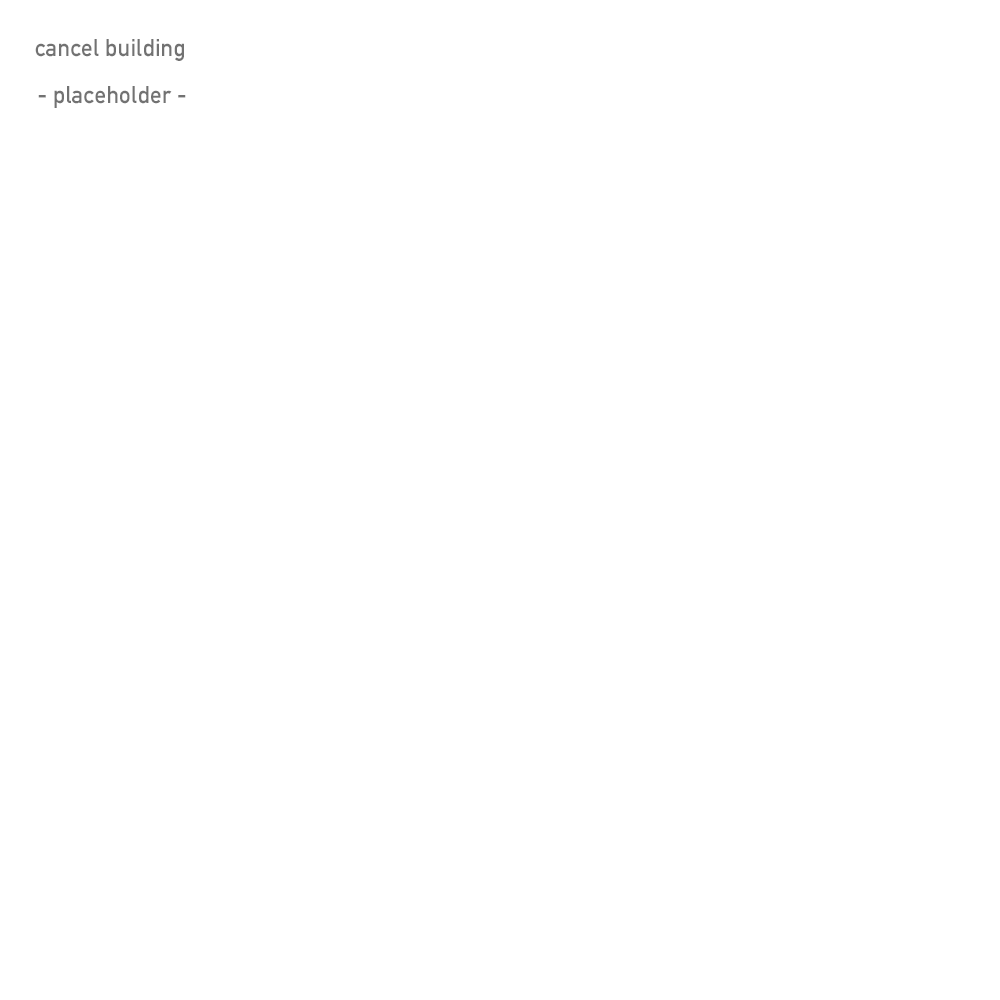
<style>
.page{position:relative;width:1000px;height:1000px;background:#ffffff}
.page>*{position:absolute;margin:0}
.t1{font:24px "DINAlternate-Bold";color:#727272}
</style>
<div class="page">
<p class="t1" style="left:35px;top:39px;width:149px;height:22px">cancel building</p>
<p class="t1" style="left:38px;top:86px;width:148px;height:22px">- placeholder -</p>
</div>
